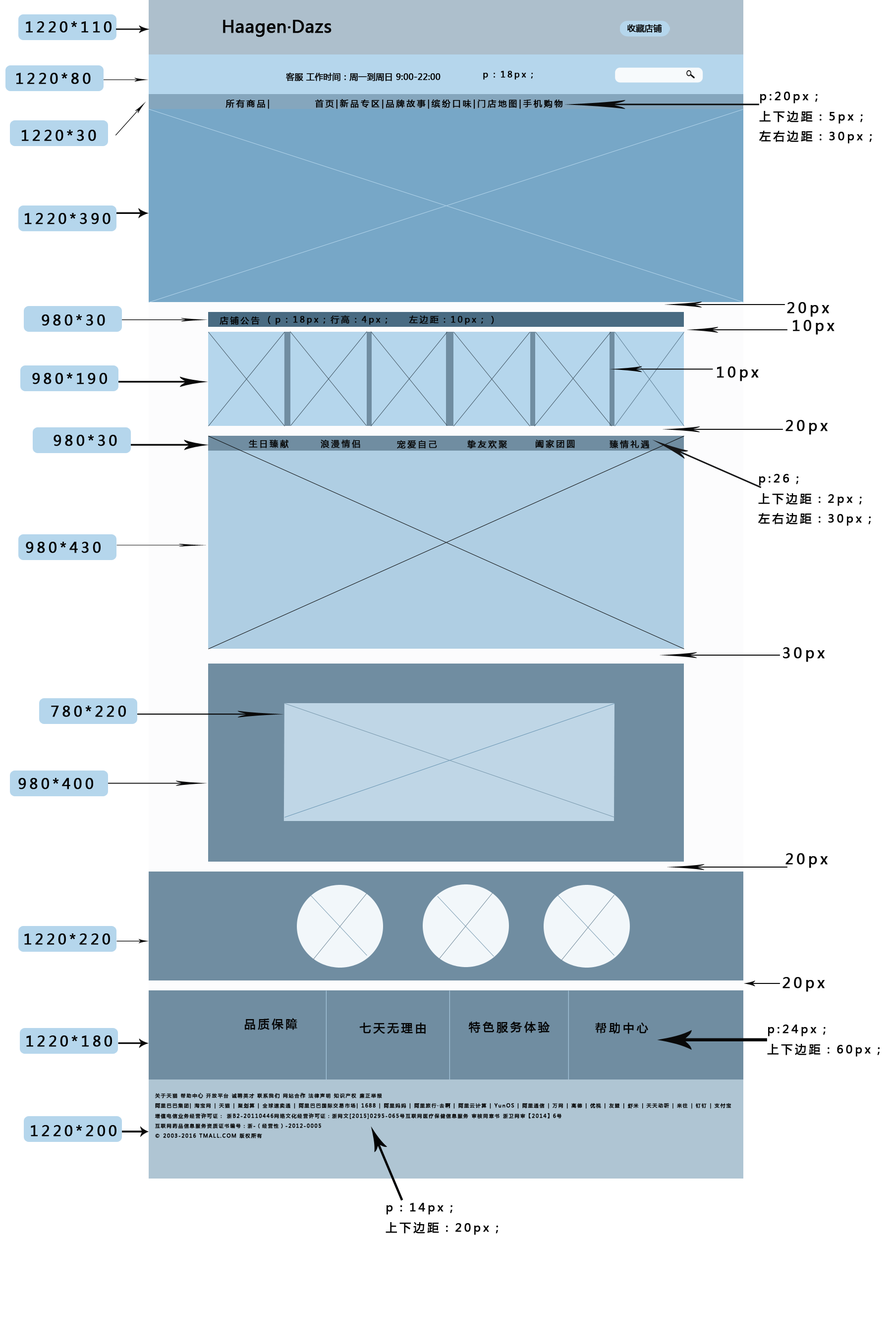
<style>
.page{position:relative;width:892px;height:1337px;background:#ffffff}
.page>*{position:absolute;margin:0}
.t1{font:16.9px "MicrosoftYaHei";color:#010101;font-weight:bold}
.t2{font:8.5px "MicrosoftYaHei";color:#010101;font-weight:bold}
.t3{font:8.5px "MicrosoftYaHei";letter-spacing:0.2em;color:#030303;font-weight:bold}
.t4{font:8.5px "MicrosoftYaHei";letter-spacing:0.2em;color:#010101;font-weight:bold}
.t5{font:11.3px/10.1px "MicrosoftYaHei";letter-spacing:0.2em;color:#030303;font-weight:bold}
.t6{font:14.1px "MicrosoftYaHei";letter-spacing:0.2em;color:#030303;font-weight:bold}
.t7{font:8.5px "MicrosoftYaHei";letter-spacing:0.2em;color:#060606;font-weight:bold}
.t8{font:11.3px "MicrosoftYaHei";letter-spacing:0.2em;color:#030303;font-weight:bold}
.t9{font:4.7px/10.1px "MicrosoftYaHei";letter-spacing:0.2em;color:#030303;font-weight:bold}
</style>
<div class="page">
<p class="t1" style="left:223px;top:20px;width:108px;height:17px">Haagen·Dazs</p>
<p class="t2" style="left:286px;top:72px;width:154px;height:9px">客服 工作时间：周一到周日 9:00-22:00</p>
<p class="t3" style="left:483px;top:71px;width:50px;height:9px">p：18px；</p>
<p class="t4" style="left:225px;top:99px;width:338px;height:10px">所有商品|   首页|新品专区|品牌故事|缤纷口味|门店地图|手机购物</p>
<p class="t5" style="left:759px;top:92px;width:112px;height:52px">p:20px；<br><br>上下边距：5px；<br><br>左右边距：30px；</p>
<p class="t6" style="left:787px;top:302px;width:42px;height:15px">20px</p>
<p class="t4" style="left:219px;top:317px;width:41px;height:8px">店铺公告</p>
<p class="t3" style="left:267px;top:315px;width:227px;height:10px">（p：18px；行高：4px； 左边距：10px；）</p>
<p class="t6" style="left:793px;top:320px;width:41px;height:15px">10px</p>
<p class="t6" style="left:717px;top:367px;width:41px;height:14px">10px</p>
<p class="t6" style="left:785px;top:420px;width:42px;height:15px">20px</p>
<p class="t7" style="left:249px;top:439px;width:40px;height:9px">生日臻献</p>
<p class="t7" style="left:320px;top:439px;width:40px;height:9px">浪漫情侣</p>
<p class="t7" style="left:397px;top:440px;width:40px;height:9px">宠爱自己</p>
<p class="t7" style="left:467px;top:440px;width:40px;height:9px">挚友欢聚</p>
<p class="t7" style="left:535px;top:439px;width:40px;height:9px">阖家团圆</p>
<p class="t7" style="left:609px;top:440px;width:40px;height:9px">臻情礼遇</p>
<p class="t5" style="left:758px;top:474px;width:112px;height:52px">p:26；<br><br>上下边距：2px；<br><br>左右边距：30px；</p>
<p class="t6" style="left:783px;top:647px;width:41px;height:15px">30px</p>
<p class="t6" style="left:785px;top:853px;width:42px;height:15px">20px</p>
<p class="t6" style="left:782px;top:977px;width:42px;height:15px">20px</p>
<p class="t8" style="left:245px;top:1018px;width:52px;height:12px">品质保障</p>
<p class="t8" style="left:359px;top:1023px;width:66px;height:11px">七天无理由</p>
<p class="t8" style="left:468px;top:1022px;width:81px;height:12px">特色服务体验</p>
<p class="t8" style="left:595px;top:1023px;width:53px;height:11px">帮助中心</p>
<p class="t5" style="left:767px;top:1025px;width:112px;height:32px">p:24px；<br><br>上下边距：60px；</p>
<p class="t9" style="left:155px;top:1093px;width:576px;height:46px">关于天猫 帮助中心 开放平台 诚聘英才 联系我们 网站合作 法律声明 知识产权 廉正举报<br>阿里巴巴集团| 淘宝网 | 天猫 | 聚划算 | 全球速卖通 | 阿里巴巴国际交易市场| 1688 | 阿里妈妈 | 阿里旅行·去啊 | 阿里云计算 | YunOS | 阿里通信 | 万网 | 高德 | 优视 | 友盟 | 虾米 | 天天动听 | 来往 | 钉钉 | 支付宝<br>增值电信业务经营许可证： 浙B2-20110446网络文化经营许可证：浙网文[2015]0295-065号互联网医疗保健信息服务 审核同意书 浙卫网审【2014】6号 <br>互联网药品信息服务资质证书编号：浙-（经营性）-2012-0005<br>© 2003-2016 TMALL.COM 版权所有</p>
<p class="t5" style="left:385px;top:1203px;width:113px;height:32px">p：14px；<br><br>上下边距：20px；</p>
</div>
